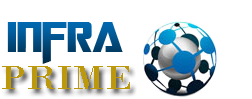
<style>
.page{position:relative;width:252px;height:99px;background:#ffffff}
.page>*{position:absolute;margin:0}
.t1{font:48px "TransformersMovie"}
.t2{font:34.5px "BodoniMT";color:#bb980c;scale:1.14 1}
</style>
<div class="page">
<p class="t1" style="left:7px;top:22px;width:116px;height:42px">Infra</p>
<p class="t2" style="left:2px;top:66px;width:128px;height:23px">PRIME</p>
</div>
